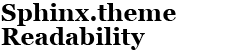
<style>
.page{position:relative;width:240px;height:51px;background:#ffffff}
.page>*{position:absolute;margin:0}
.t1{font:24px/24px "Georgia-Bold";letter-spacing:0.01em;color:#000000}
</style>
<div class="page">
<p class="t1" style="left:1px;top:3px;width:175px;height:47px">Sphinx.theme<br>Readability</p>
</div>
